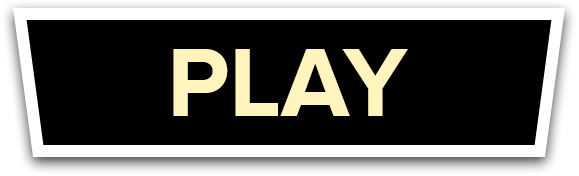
<style>
.page{position:relative;width:579px;height:176px;background:#000000}
.page>*{position:absolute;margin:0}
.t1{font:100px "ProximaNova-Bold";color:#fff4bd;text-transform:uppercase}
</style>
<div class="page">
<p class="t1" style="left:173px;top:49px;width:235px;height:67px">Play</p>
</div>
